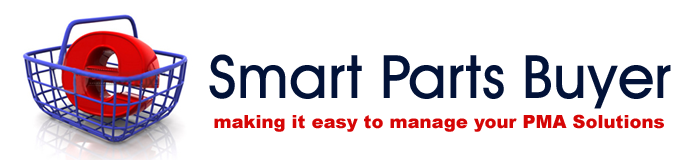
<style>
.page{position:relative;width:692px;height:160px;background:#ffffff}
.page>*{position:absolute;margin:0}
.t1{font:60px "AvantGardeITCbyBT-Medium";color:#021238}
.t2{font:18px "Arial-Black";color:#d60606}
</style>
<div class="page">
<p class="t1" style="left:209px;top:54px;width:462px;height:55px">Smart Parts Buyer</p>
<p class="t2" style="left:214px;top:114px;width:450px;height:18px">making it easy to manage your PMA Solutions</p>
</div>
